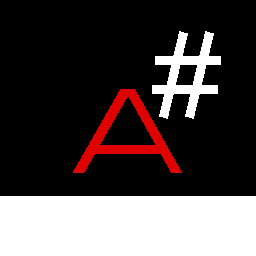
<style>
.page{position:relative;width:256px;height:256px;background:#000000}
.page>*{position:absolute;margin:0}
.t1{font:112px "Michroma";color:#ffffff}
.t2{font:112px "Michroma";color:#df0000}
</style>
<div class="page">
<p class="t1" style="left:152px;top:31px;width:69px;height:88px">#</p>
<p class="t2" style="left:73px;top:89px;width:109px;height:84px">A</p>
</div>
